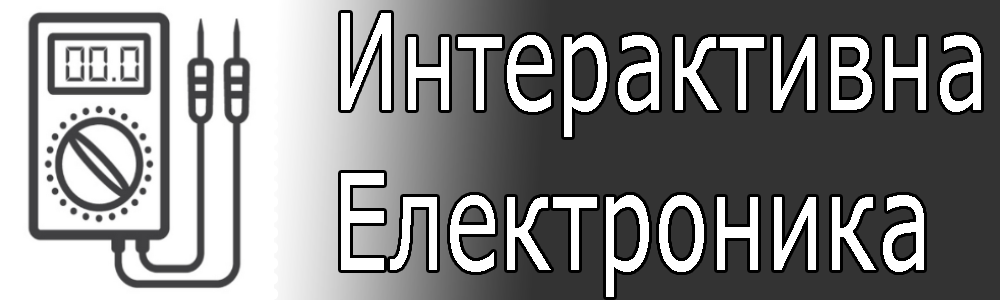
<style>
.page{position:relative;width:1000px;height:300px;background:#333333}
.page>*{position:absolute;margin:0}
.t1{font:133.9px "Verdana";color:#ffffff;scale:0.68 1}
</style>
<div class="page">
<p class="t1" style="left:341px;top:13px;width:640px;height:284px;text-align:right">Интерактивна<br>Електроника</p>
</div>
